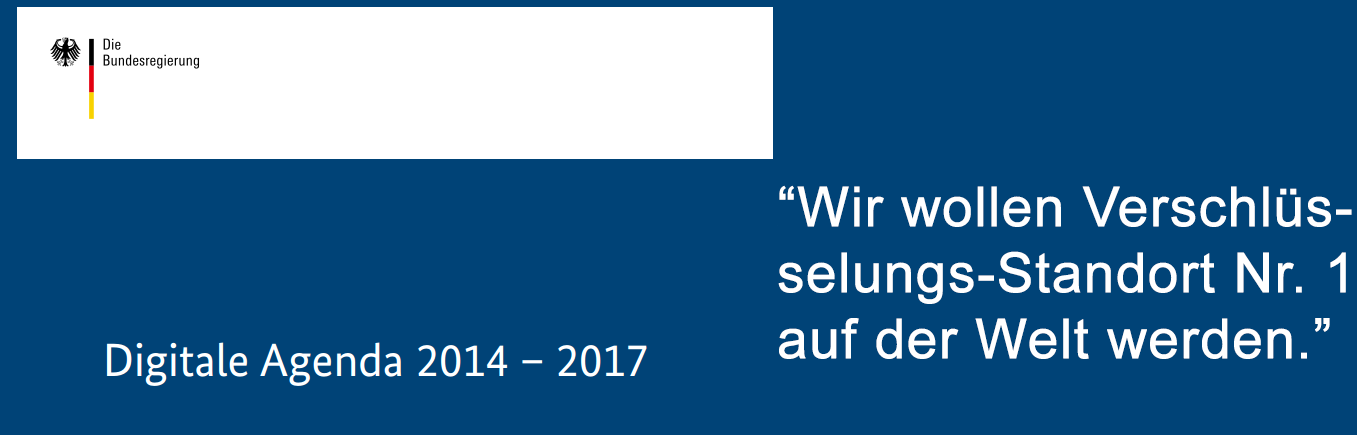
<style>
.page{position:relative;width:1357px;height:435px;background:#004377}
.page>*{position:absolute;margin:0}
.t1{font:55px "ArialMT";color:#ffffff;font-weight:bold}
.t2{font:1px "ArialMT";color:#ffffff;font-weight:bold}
</style>
<div class="page">
<p class="t1" style="left:777px;top:185px;width:578px;height:174px;text-align:right"><span class="t2">h</span>“Wir wollen Verschlüs-<span class="t2">h<br></span>selungs-Standort Nr. 1<br>auf der Welt werden.”<span class="t2">h</span></p>
</div>
